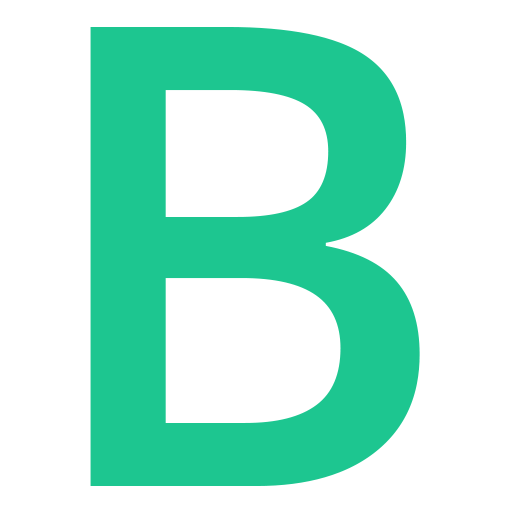
<style>
.page{position:relative;width:512px;height:512px;background:#ffffff}
.page>*{position:absolute;margin:0}
.t1{font:643.3px "OpenSans-SemiBold";color:#1dc690}
</style>
<div class="page">
<p class="t1" style="left:90px;top:27px;width:330px;height:459px">B</p>
</div>
